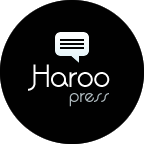
<style>
.page{position:relative;width:144px;height:144px;background:#010101}
.page>*{position:absolute;margin:0}
.t1{font:30px "Quadranta";color:#ffffff}
.t2{font:18px "Quadranta";color:#aeb9be}
</style>
<div class="page">
<p class="t1" style="left:28px;top:64px;width:82px;height:27px">Haroo</p>
<p class="t2" style="left:69px;top:93px;width:40px;height:14px">press</p>
</div>
